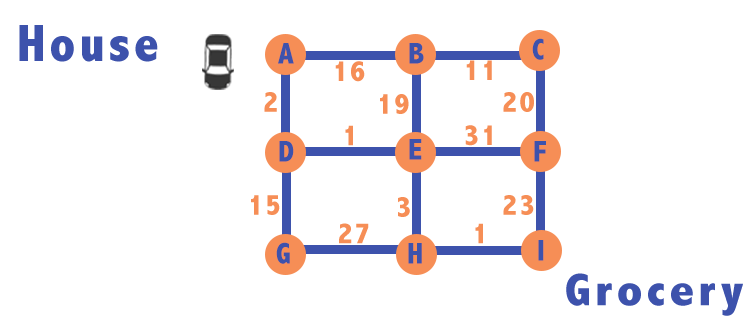
<style>
.page{position:relative;width:747px;height:316px;background:#ffffff}
.page>*{position:absolute;margin:0}
.t1{font:52.8px "AbadiMT-CondensedExtraBold";letter-spacing:0.075em;color:#3d52ac}
.t2{font:30px "AbadiMT-CondensedExtraBold";letter-spacing:0.075em;color:#3d52ac}
.t3{font:30px "AbadiMT-CondensedExtraBold";letter-spacing:0.075em;color:#f68e56}
.t4{font:46px "AbadiMT-CondensedExtraBold";letter-spacing:0.075em;color:#3d52ac;scale:1.15 1}
</style>
<div class="page">
<p class="t1" style="left:19px;top:25px;width:139px;height:37px">House</p>
<p class="t2" style="left:532px;top:38px;width:12px;height:22px">C</p>
<p class="t2" style="left:278px;top:43px;width:16px;height:21px">A</p>
<p class="t2" style="left:409px;top:43px;width:15px;height:21px">B</p>
<p class="t3" style="left:335px;top:61px;width:30px;height:21px">16</p>
<p class="t3" style="left:466px;top:60px;width:26px;height:20px">11</p>
<p class="t3" style="left:264px;top:92px;width:13px;height:20px">2</p>
<p class="t3" style="left:380px;top:94px;width:29px;height:20px">19</p>
<p class="t3" style="left:503px;top:92px;width:31px;height:20px">20</p>
<p class="t3" style="left:345px;top:125px;width:8px;height:21px">1</p>
<p class="t3" style="left:465px;top:125px;width:27px;height:21px">31</p>
<p class="t2" style="left:279px;top:141px;width:15px;height:21px">D</p>
<p class="t2" style="left:409px;top:139px;width:13px;height:21px">E</p>
<p class="t2" style="left:534px;top:141px;width:12px;height:21px">F</p>
<p class="t3" style="left:251px;top:195px;width:29px;height:20px">15</p>
<p class="t3" style="left:398px;top:197px;width:12px;height:20px">3</p>
<p class="t3" style="left:503px;top:195px;width:31px;height:20px">23</p>
<p class="t3" style="left:339px;top:223px;width:30px;height:21px">27</p>
<p class="t3" style="left:475px;top:223px;width:8px;height:21px">1</p>
<p class="t2" style="left:276px;top:242px;width:14px;height:22px">G</p>
<p class="t2" style="left:408px;top:243px;width:14px;height:21px">H</p>
<p class="t2" style="left:538px;top:240px;width:6px;height:21px">I</p>
<p class="t4" style="left:566px;top:273px;width:177px;height:43px">Grocery</p>
</div>
